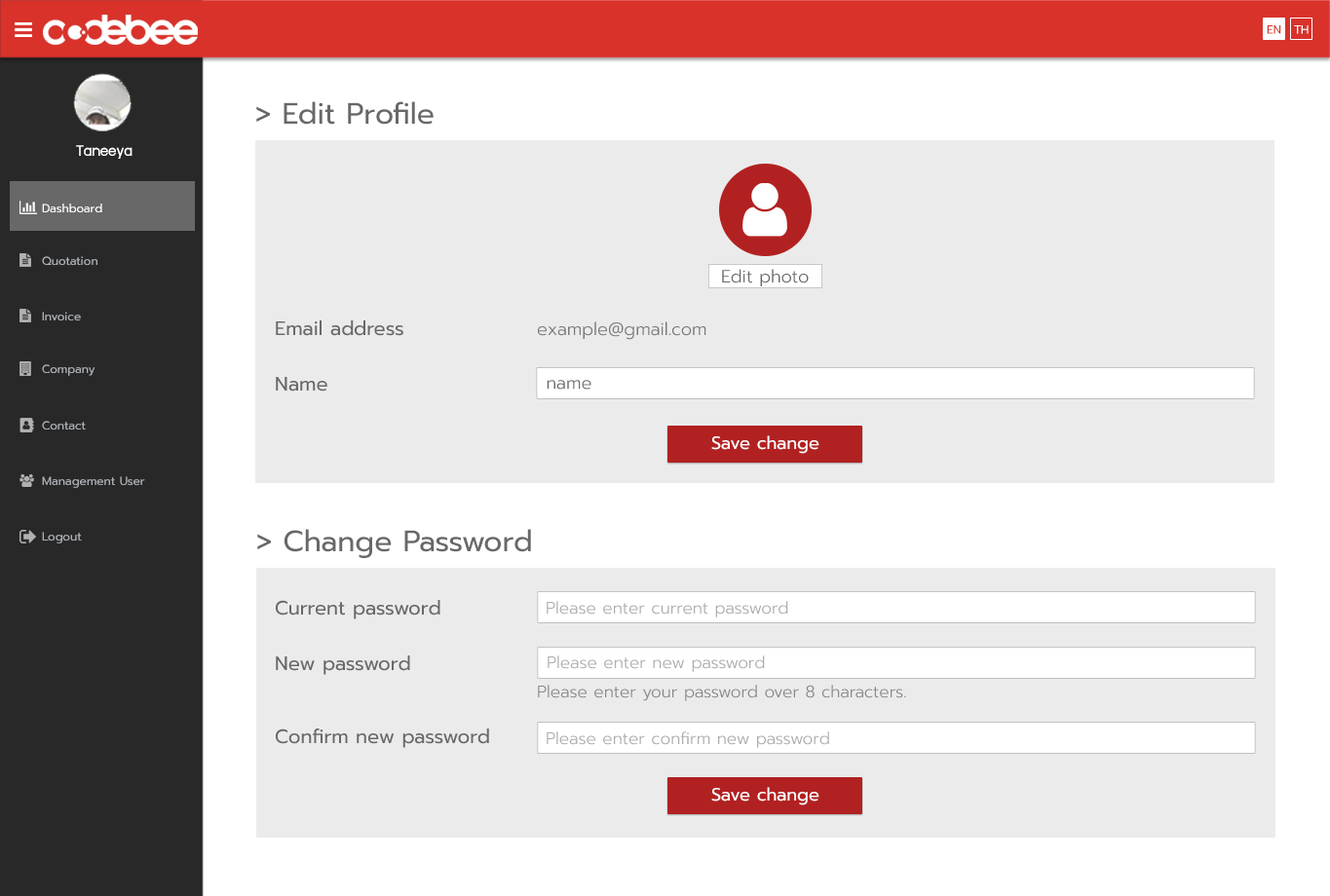
<style>
.page{position:relative;width:1330px;height:896px;background:#ebebeb}
.page>*{position:absolute;margin:0}
.t1{font:11.7px "Prompt-Regular";color:#d8322b}
.t2{font:11.7px "Prompt-Regular";color:#ffffff}
.t3{font:29.2px "Prompt-Regular";color:#686868}
.t4{font:17.5px "supermarket";color:#ffffff}
.t5{font:11.7px "Prompt-Regular";color:#aeb2b7}
.t6{font:17.5px "Prompt-Light";color:#686868}
.t7{font:19.5px "Prompt-Regular";color:#686868}
.t8{font:17.5px "Prompt-Light";color:#797979}
.t9{font:17.5px "Prompt-Regular";color:#ffffff}
.t10{font:16.6px "Prompt-Light";color:#acacac}
.t11{font:16.6px "Prompt-Light";color:#8a8787}
</style>
<div class="page">
<p class="t1" style="left:1267px;top:25px;width:14px;height:9px">EN</p>
<p class="t2" style="left:1294px;top:25px;width:15px;height:9px">TH</p>
<p class="t3" style="left:256px;top:101px;width:178px;height:24px">&gt; Edit Profile</p>
<p class="t4" style="left:76px;top:145px;width:57px;height:14px">Taneeya</p>
<p class="t2" style="left:42px;top:204px;width:60px;height:9px">Dashboard</p>
<p class="t5" style="left:42px;top:256px;width:55px;height:10px">Quotation</p>
<p class="t6" style="left:722px;top:269px;width:87px;height:17px">Edit photo</p>
<p class="t5" style="left:42px;top:312px;width:39px;height:10px">Invoice</p>
<p class="t7" style="left:276px;top:321px;width:127px;height:15px">Email address</p>
<p class="t8" style="left:538px;top:322px;width:168px;height:18px">example@gmail.com</p>
<p class="t5" style="left:42px;top:364px;width:53px;height:12px">Company</p>
<p class="t7" style="left:276px;top:377px;width:51px;height:15px">Name</p>
<p class="t6" style="left:547px;top:380px;width:44px;height:10px">name</p>
<p class="t5" style="left:42px;top:421px;width:44px;height:10px">Contact</p>
<p class="t9" style="left:711px;top:436px;width:109px;height:18px">Save change</p>
<p class="t5" style="left:42px;top:477px;width:103px;height:11px">Management User</p>
<p class="t5" style="left:42px;top:532px;width:40px;height:12px">Logout</p>
<p class="t3" style="left:257px;top:529px;width:274px;height:29px">&gt; Change Password</p>
<p class="t7" style="left:276px;top:600px;width:164px;height:20px">Current password</p>
<p class="t10" style="left:547px;top:601px;width:241px;height:17px">Please enter current password</p>
<p class="t7" style="left:276px;top:656px;width:134px;height:19px">New password</p>
<p class="t10" style="left:548px;top:656px;width:217px;height:16px">Please enter new password</p>
<p class="t11" style="left:538px;top:685px;width:368px;height:17px">Please enter your password over 8 characters.</p>
<p class="t7" style="left:276px;top:729px;width:213px;height:19px">Confirm new password</p>
<p class="t10" style="left:547px;top:732px;width:282px;height:16px">Please enter confirm new password</p>
<p class="t9" style="left:711px;top:787px;width:109px;height:19px">Save change</p>
</div>
